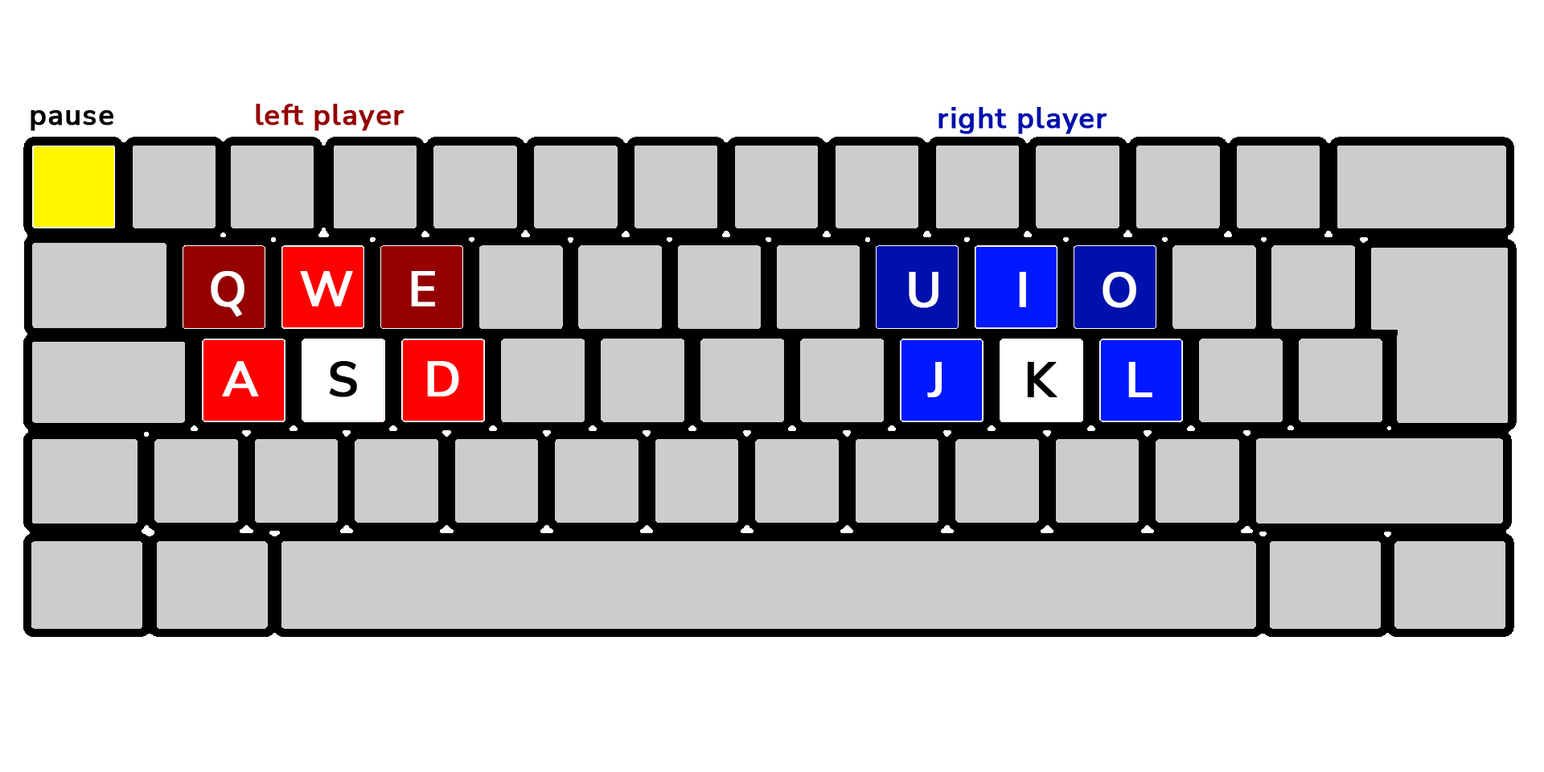
<style>
.page{position:relative;width:1544px;height:772px;background:#ffffff}
.page>*{position:absolute;margin:0}
.t1{font:29px "NunitoSans-SemiBold";letter-spacing:0.025em;color:#000000;font-weight:bold}
.t2{font:29px "NunitoSans-SemiBold";letter-spacing:0.025em;color:#940000;font-weight:bold}
.t3{font:29px "NunitoSans-SemiBold";letter-spacing:0.025em;color:#0010ac;font-weight:bold}
.t4{font:48.3px "NunitoSans-SemiBold";letter-spacing:0.025em;color:#ffffff;font-weight:bold}
.t5{font:48.3px "NunitoSans-SemiBold";letter-spacing:0.025em;color:#000000;font-weight:bold}
</style>
<div class="page">
<p class="t1" style="left:31px;top:110px;width:82px;height:21px">pause</p>
<p class="t2" style="left:256px;top:104px;width:149px;height:27px">left player</p>
<p class="t3" style="left:939px;top:107px;width:169px;height:27px">right player</p>
<p class="t4" style="left:211px;top:271px;width:34px;height:46px">Q</p>
<p class="t4" style="left:300px;top:271px;width:53px;height:35px">W</p>
<p class="t4" style="left:411px;top:271px;width:24px;height:35px">E</p>
<p class="t4" style="left:909px;top:272px;width:30px;height:36px">U</p>
<p class="t4" style="left:1019px;top:272px;width:7px;height:35px">I</p>
<p class="t4" style="left:1103px;top:272px;width:34px;height:36px">O</p>
<p class="t4" style="left:222px;top:361px;width:37px;height:36px">A</p>
<p class="t5" style="left:329px;top:361px;width:28px;height:36px">S</p>
<p class="t4" style="left:427px;top:361px;width:32px;height:36px">D</p>
<p class="t4" style="left:927px;top:362px;width:15px;height:35px">J</p>
<p class="t5" style="left:1027px;top:362px;width:31px;height:35px">K</p>
<p class="t4" style="left:1128px;top:362px;width:25px;height:35px">L</p>
</div>
